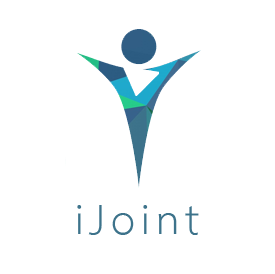
<style>
.page{position:relative;width:275px;height:274px;background:#ffffff}
.page>*{position:absolute;margin:0}
.t1{font:60px "THSarabunPSK";letter-spacing:0.1em;color:#3d738b}
</style>
<div class="page">
<p class="t1" style="left:77px;top:205px;width:122px;height:30px">iJoint</p>
</div>
